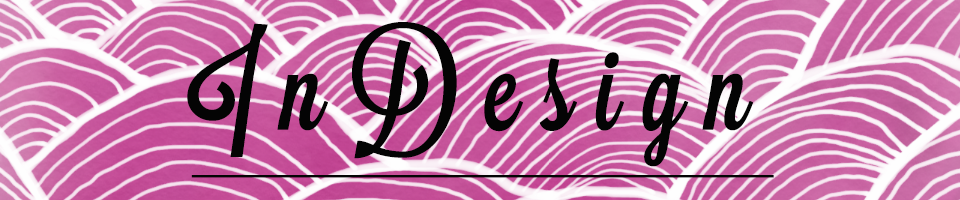
<style>
.page{position:relative;width:960px;height:200px}
.page>*{position:absolute;margin:0}
.t1{font:120px "Lavanderia-Sturdy";letter-spacing:0.2em;color:#040404;text-decoration:underline}
</style>
<div class="page">
<p class="t1" style="left:187px;top:22px;width:587px;height:156px">InDesign</p>
</div>
